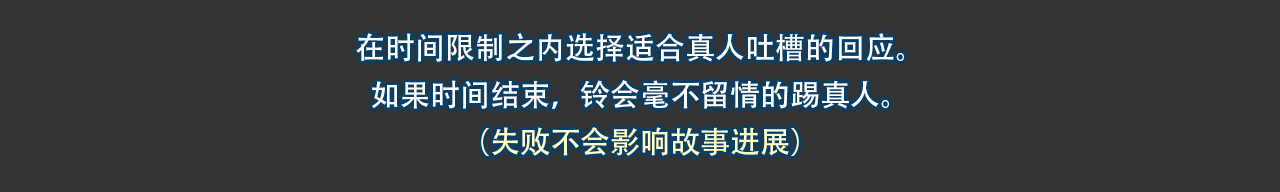
<style>
.page{position:relative;width:1280px;height:192px;background:#333333}
.page>*{position:absolute;margin:0}
.t1{font:30px/47px "AdobeHeitiStd-Regular";color:#ffffff}
.t2{font:30px/47px "AdobeHeitiStd-Regular";color:#ffffcc}
</style>
<div class="page">
<p class="t1" style="left:356px;top:33px;width:548px;height:123px;text-align:center">在时间限制之内选择适合真人吐槽的回应。<br>如果时间结束，铃会毫不留情的踢真人。<br><span class="t2">（失败不会影响故事进展）</span></p>
</div>
